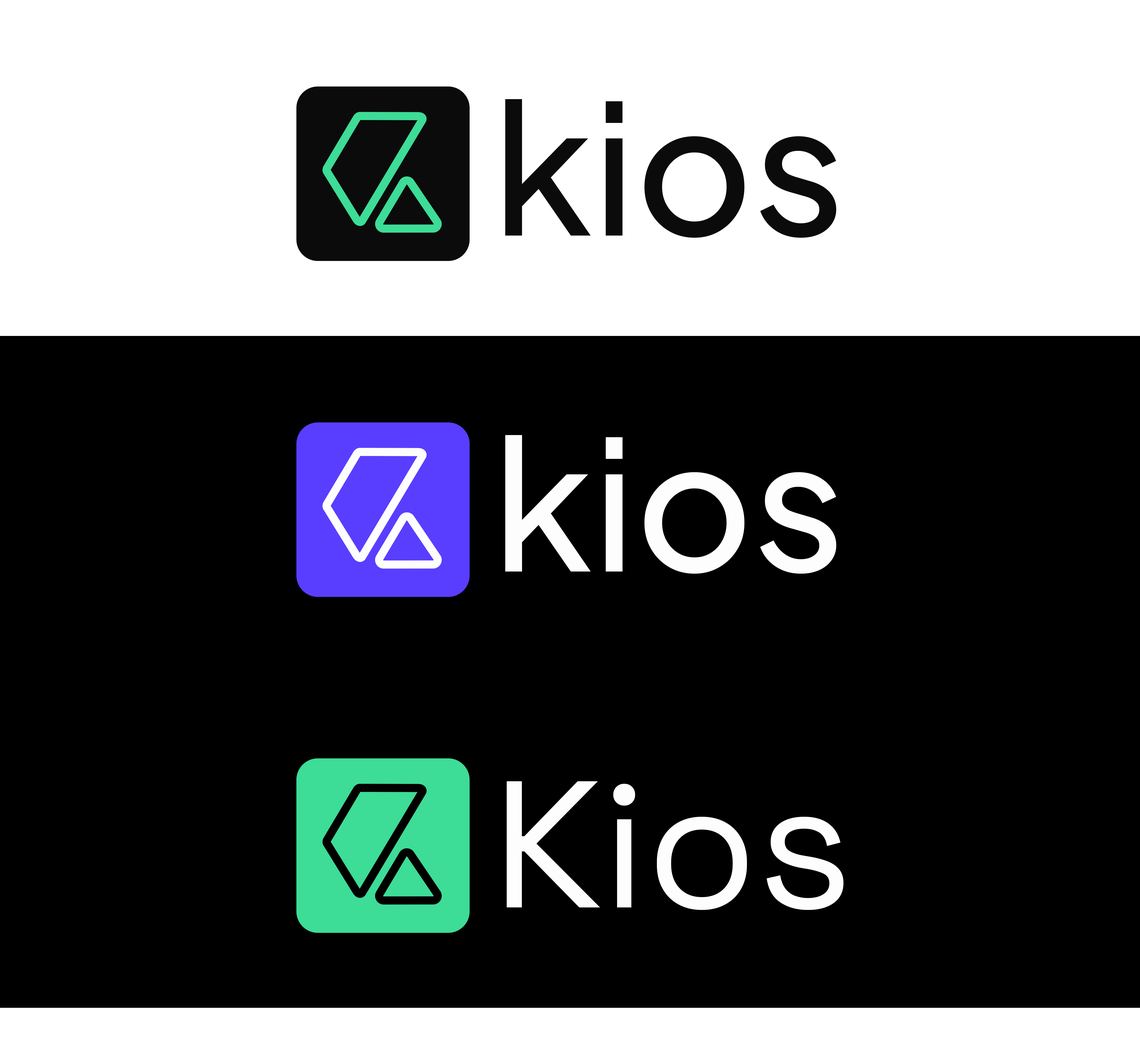
<style>
.page{position:relative;width:1140px;height:1046px;background:#000000}
.page>*{position:absolute;margin:0}
.t1{font:180.1px "PlusJakartaSans-Medium";color:#0b0b0b}
.t2{font:180.1px "PlusJakartaSans-Medium";color:#fefdfd}
.t3{font:180.1px "SpaceGrotesk-Regular";color:#fefdfd}
</style>
<div class="page">
<p class="t1" style="left:505px;top:99px;width:332px;height:139px">kios</p>
<p class="t2" style="left:505px;top:435px;width:332px;height:138px">kios</p>
<p class="t3" style="left:507px;top:781px;width:337px;height:129px">Kios</p>
</div>
